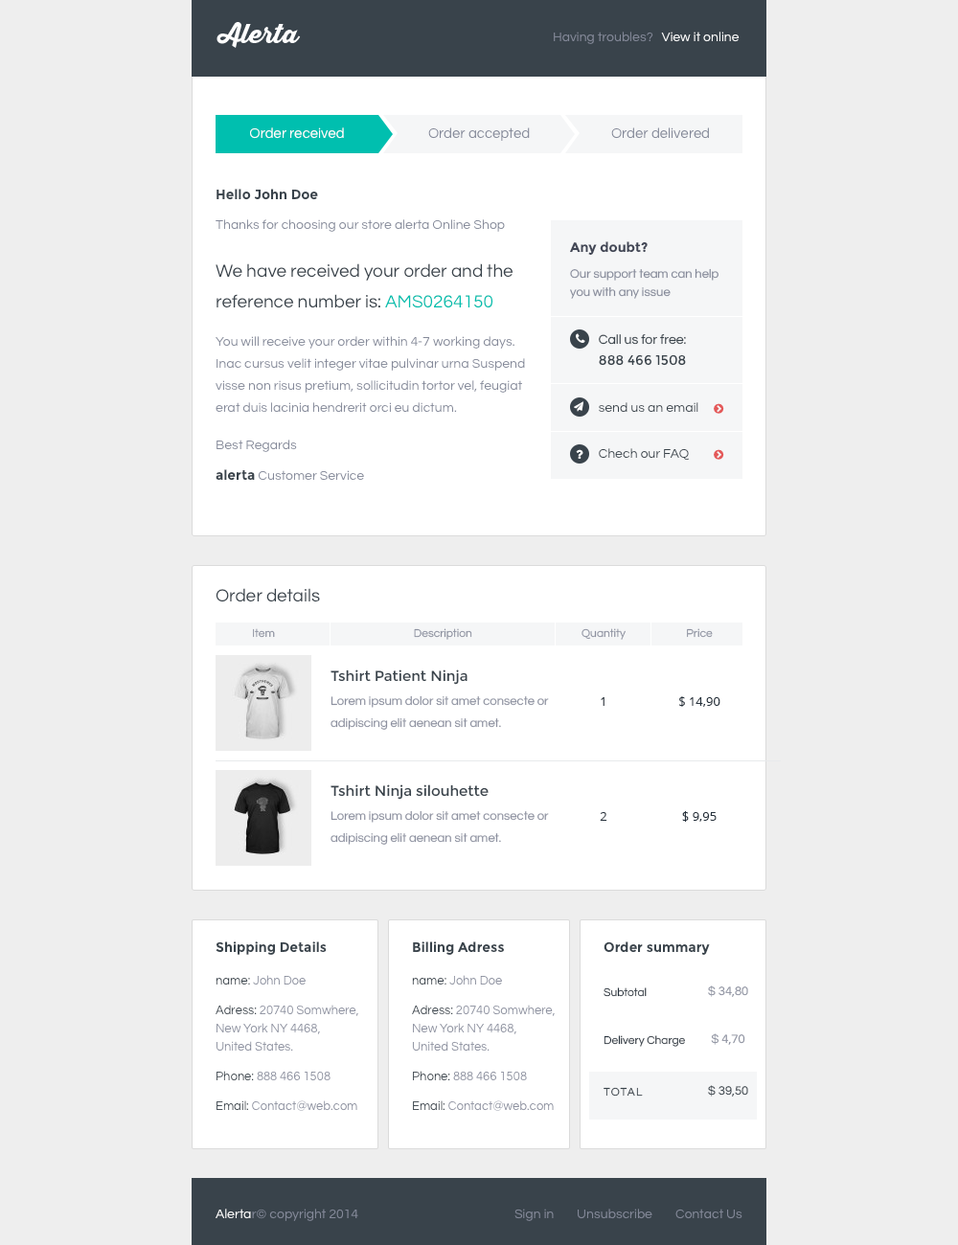
<style>
.page{position:relative;width:958px;height:1245px;background:#eeeeee}
.page>*{position:absolute;margin:0}
.t1{font:25.9px "ThirstyScriptExtraboldDemo";color:#ffffff}
.t2{font:13.4px "Questrial-Regular";color:#848999}
.t3{font:13.4px "Questrial-Regular";color:#ffffff}
.t4{font:14.4px "Questrial-Regular";color:#ffffff}
.t5{font:14.4px "Questrial-Regular";color:#848999}
.t6{font:13.4px "Montserrat-Bold";color:#39434b}
.t7{font:13.4px "Montserrat-Bold";color:#414655}
.t8{font:18.2px/30.6px "Questrial-Regular";color:#39434b}
.t9{font:18.2px/30.6px "Questrial-Regular";color:#00bfaf}
.t10{font:12.5px/18.2px "Questrial-Regular";color:#848999}
.t11{font:13.4px/22px "Questrial-Regular";color:#848999}
.t12{font:13.4px "Questrial-Regular";color:#39434b}
.t13{font:13.4px "Montserrat-Regular";color:#39434b}
.t14{font:13.4px/30.6px "Questrial-Regular";color:#848999}
.t15{font:13.4px/30.6px "Montserrat-Bold";color:#39434b}
.t16{font:18.2px "Questrial-Regular";color:#39434b}
.t17{font:11.5px "Questrial-Regular";color:#8c909f}
.t18{font:14.4px "Montserrat-Regular";color:#39434b}
.t19{font:12.5px/22px "Questrial-Regular";color:#8c909f}
.t20{font:12.5px "OpenSans"}
.t21{font:12.5px "OpenSans";color:#26313c}
.t22{font:12.5px "Questrial-Regular";color:#8c909f}
.t23{font:12.5px "Questrial-Regular";color:#39434b}
.t24{font:11.5px "Questrial-Regular";color:#26313c}
.t25{font:12.5px/18.2px "Questrial-Regular";color:#8c909f}
.t26{font:12.5px/18.2px "Questrial-Regular";color:#39434b}
.t27{font:11.5px "Questrial-Regular";letter-spacing:0.1em;color:#39434b;text-transform:uppercase}
</style>
<div class="page">
<p class="t1" style="left:216px;top:22px;width:85px;height:26px">Alerta</p>
<p class="t2" style="left:554px;top:32px;width:185px;height:12px">Having troubles?   <span class="t3">View it online</span></p>
<p class="t4" style="left:250px;top:127px;width:94px;height:12px">Order received</p>
<p class="t5" style="left:428px;top:127px;width:102px;height:14px">Order accepted</p>
<p class="t5" style="left:611px;top:127px;width:98px;height:12px">Order delivered</p>
<p class="t6" style="left:216px;top:189px;width:102px;height:11px">Hello John Doe</p>
<p class="t2" style="left:215px;top:219px;width:290px;height:13px">Thanks for choosing our store alerta Online Shop</p>
<p class="t7" style="left:570px;top:241px;width:77px;height:15px">Any doubt?</p>
<p class="t8" style="left:215px;top:263px;width:298px;height:45px">We have received your order and the reference number is: <span class="t9">AMS0264150</span></p>
<p class="t10" style="left:570px;top:268px;width:148px;height:31px">Our support team can help you with any issue</p>
<p class="t11" style="left:215px;top:336px;width:310px;height:77px">You will receive your order within 4-7 working days. Inac cursus velit integer vitae pulvinar urna Suspend visse non risus pretium, sollicitudin tortor vel, feugiat erat duis lacinia hendrerit orci eu dictum.</p>
<p class="t12" style="left:599px;top:333px;width:87px;height:12px">Call us for free:</p>
<p class="t13" style="left:599px;top:354px;width:87px;height:12px">888 466 1508</p>
<p class="t12" style="left:599px;top:402px;width:99px;height:11px">send us an email</p>
<p class="t14" style="left:215px;top:440px;width:149px;height:41px">Best Regards<br><span class="t15">alerta </span>Customer Service</p>
<p class="t12" style="left:599px;top:448px;width:91px;height:13px">Chech our FAQ</p>
<p class="t16" style="left:215px;top:588px;width:105px;height:14px">Order details</p>
<p class="t17" style="left:253px;top:628px;width:22px;height:10px">Item</p>
<p class="t17" style="left:414px;top:628px;width:58px;height:12px">Description</p>
<p class="t17" style="left:581px;top:628px;width:44px;height:12px">Quantity</p>
<p class="t17" style="left:687px;top:628px;width:26px;height:10px">Price</p>
<p class="t18" style="left:330px;top:669px;width:137px;height:16px">Tshirt Patient Ninja</p>
<p class="t19" style="left:330px;top:695px;width:219px;height:35px">Lorem ipsum dolor sit amet consecte or adipiscing elit aenean sit amet.</p>
<p class="t20" style="left:600px;top:697px;width:4px;height:9px">1</p>
<p class="t21" style="left:679px;top:696px;width:41px;height:11px">$ 14,90</p>
<p class="t18" style="left:330px;top:784px;width:158px;height:16px">Tshirt Ninja silouhette</p>
<p class="t19" style="left:330px;top:810px;width:219px;height:35px">Lorem ipsum dolor sit amet consecte or adipiscing elit aenean sit amet.</p>
<p class="t21" style="left:600px;top:812px;width:7px;height:9px">2</p>
<p class="t21" style="left:682px;top:811px;width:34px;height:11px">$ 9,95</p>
<p class="t6" style="left:215px;top:941px;width:112px;height:14px">Shipping Details</p>
<p class="t6" style="left:413px;top:941px;width:91px;height:14px">Billing Adress</p>
<p class="t6" style="left:603px;top:941px;width:107px;height:14px">Order summary</p>
<p class="t22" style="left:215px;top:975px;width:91px;height:11px"><span class="t23">name: </span>John Doe</p>
<p class="t22" style="left:412px;top:975px;width:90px;height:11px"><span class="t23">name: </span>John Doe</p>
<p class="t24" style="left:603px;top:987px;width:43px;height:10px">Subtotal</p>
<p class="t22" style="left:708px;top:986px;width:40px;height:11px">$ 34,80</p>
<p class="t25" style="left:215px;top:1005px;width:143px;height:47px"><span class="t26">Adress: </span>20740 Somwhere, New York NY 4468,<br>United States.</p>
<p class="t25" style="left:412px;top:1005px;width:143px;height:47px"><span class="t26">Adress: </span>20740 Somwhere, New York NY 4468,<br>United States.</p>
<p class="t24" style="left:603px;top:1035px;width:82px;height:12px">Delivery Charge</p>
<p class="t22" style="left:711px;top:1033px;width:34px;height:12px">$ 4,70</p>
<p class="t22" style="left:216px;top:1071px;width:114px;height:10px"><span class="t23">Phone: </span>888 466 1508</p>
<p class="t22" style="left:413px;top:1071px;width:114px;height:10px"><span class="t23">Phone: </span>888 466 1508</p>
<p class="t23" style="left:708px;top:1085px;width:40px;height:12px">$ 39,50</p>
<p class="t27" style="left:603px;top:1087px;width:40px;height:10px">ToTal</p>
<p class="t22" style="left:216px;top:1100px;width:141px;height:11px"><span class="t23">Email: </span>Contact@web.com</p>
<p class="t22" style="left:413px;top:1100px;width:141px;height:11px"><span class="t23">Email: </span>Contact@web.com</p>
<p class="t2" style="left:215px;top:1209px;width:143px;height:12px"><span class="t3">Alerta</span>r© copyright 2014</p>
<p class="t2" style="left:514px;top:1209px;width:228px;height:12px">Sign in        Unsubscribe        Contact Us</p>
</div>
